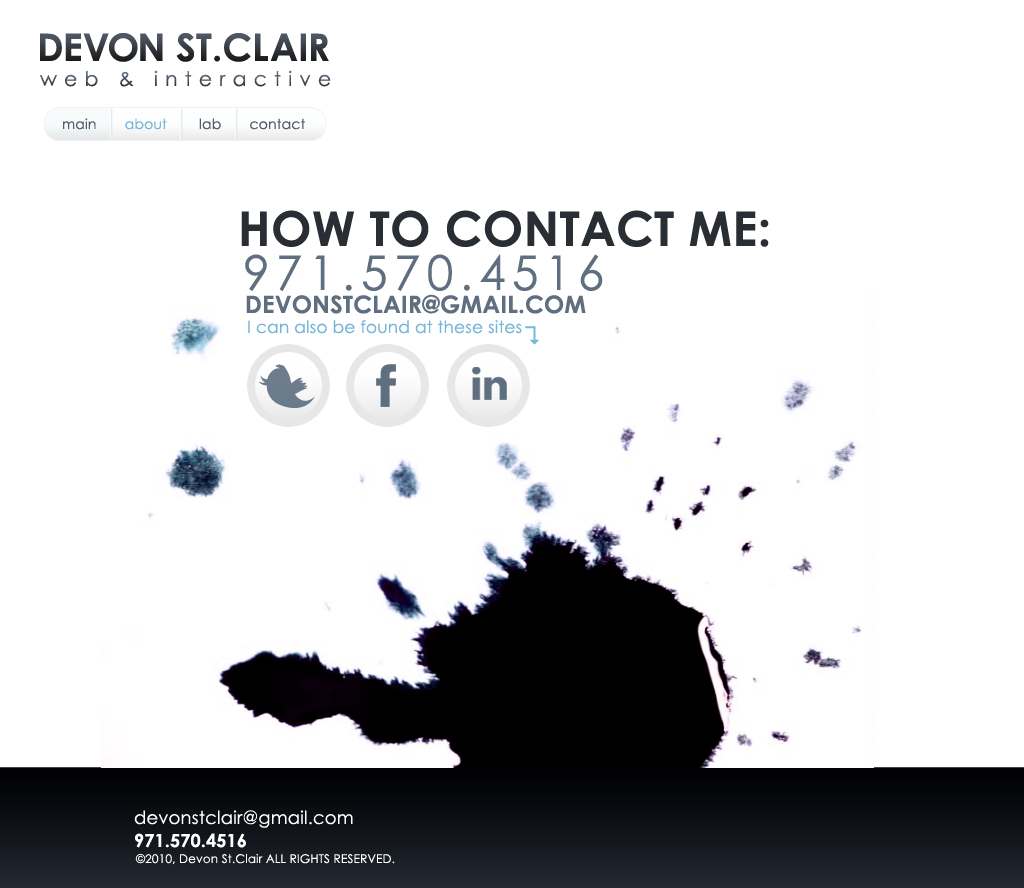
<style>
.page{position:relative;width:1024px;height:888px;background:#ffffff}
.page>*{position:absolute;margin:0}
.t1{font:38px "CenturyGothic-Bold"}
.t2{font:38px "CenturyGothic-Bold";letter-spacing:-0.02em}
.t3{font:38px "CenturyGothic-Bold";letter-spacing:0.005em}
.t4{font:38px "CenturyGothic-Bold";letter-spacing:-0.055em}
.t5{font:38px "CenturyGothic-Bold";letter-spacing:-0.05em}
.t6{font:38px "CenturyGothic-Bold";letter-spacing:0.03em}
.t7{font:38px "CenturyGothic-Bold";letter-spacing:-0.025em}
.t8{font:20.3px "CenturyGothic";letter-spacing:0.356em;color:#394754}
.t9{font:14px "CenturyGothic";letter-spacing:0.01em;color:#525e6b}
.t10{font:14px "CenturyGothic";letter-spacing:0.01em;color:#76b7d8}
.t11{font:48px "CenturyGothic-Bold";letter-spacing:0.01em;color:#282e33;text-transform:uppercase}
.t12{font:48px "CenturyGothic";letter-spacing:0.13em;color:#5f6f7f;text-transform:uppercase}
.t13{font:24px "CenturyGothic-Bold";letter-spacing:0.01em;color:#5f6f7f;text-transform:uppercase}
.t14{font:17px "CenturyGothic";letter-spacing:0.01em;color:#76b7d8}
.t15{font:18px/11px "CenturyGothic";letter-spacing:0.01em;color:#ffffff}
.t16{font:18px/11px "CenturyGothic-Bold";letter-spacing:0.01em;color:#ffffff}
.t17{font:12px "CenturyGothic";letter-spacing:0.01em;color:#ffffff}
</style>
<div class="page">
<p class="t1" style="left:40px;top:33px;width:289px;height:29px"><span class="t2">D</span><span class="t3">E</span><span class="t4">V</span><span class="t5">O</span>N ST.C<span class="t6">L</span>A<span class="t7">IR</span></p>
<p class="t8" style="left:40px;top:70px;width:291px;height:17px;opacity:0.9">web &amp; interactive</p>
<p class="t9" style="left:63px;top:118px;width:242px;height:12px">main       <span class="t10">about </span>       lab       contact</p>
<p class="t11" style="left:241px;top:210px;width:528px;height:37px">how to contact me:</p>
<p class="t12" style="left:245px;top:254px;width:358px;height:37px">971.570.4516</p>
<p class="t13" style="left:246px;top:294px;width:340px;height:20px">devonstclair@gmail.com</p>
<p class="t14" style="left:248px;top:320px;width:274px;height:14px">I can also be found at these sites</p>
<p class="t15" style="left:134px;top:810px;width:219px;height:38px">devonstclair@gmail.com<br><span class="t16">971.570.4516</span></p>
<p class="t17" style="left:135px;top:853px;width:260px;height:12px">©2010, Devon St.Clair ALL RIGHTS RESERVED.</p>
</div>
